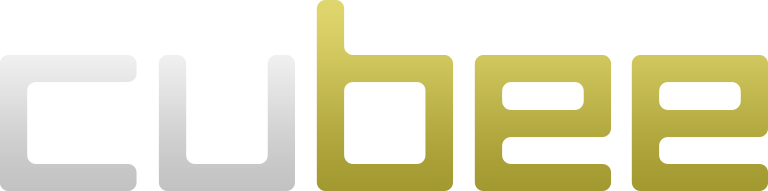
<style>
.page{position:relative;width:768px;height:191px;background:#ffffff}
.page>*{position:absolute;margin:0}
.t1{font:245px "RazerRegular"}
</style>
<div class="page">
<p class="t1" style="left:0px;top:0px;width:768px;height:191px">Cubee</p>
</div>
